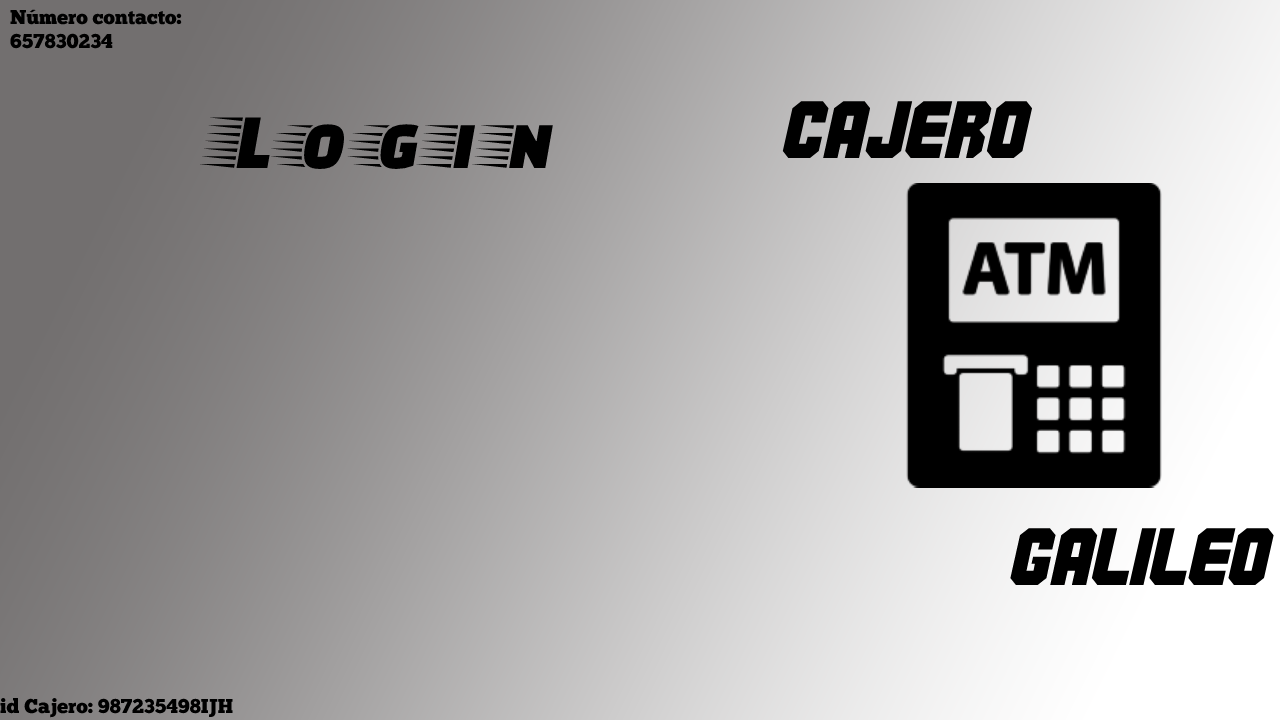
<style>
.page{position:relative;width:1280px;height:720px}
.page>*{position:absolute;margin:0}
.t1{font:20px "ChunkFive-Regular";color:#000000}
.t2{font:81px "Commando";color:#000000}
.t3{font:81px "FasterOne-Regular";color:#000000}
</style>
<div class="page">
<p class="t1" style="left:10px;top:9px;width:172px;height:40px">Número contacto:<br>657830234</p>
<p class="t2" style="left:782px;top:101px;width:251px;height:57px">Cajero</p>
<p class="t3" style="left:199px;top:117px;width:354px;height:52px">L o g i n</p>
<p class="t2" style="left:1010px;top:528px;width:264px;height:57px">Galileo</p>
<p class="t1" style="left:0px;top:698px;width:233px;height:20px">id Cajero: 987235498IJH</p>
</div>
